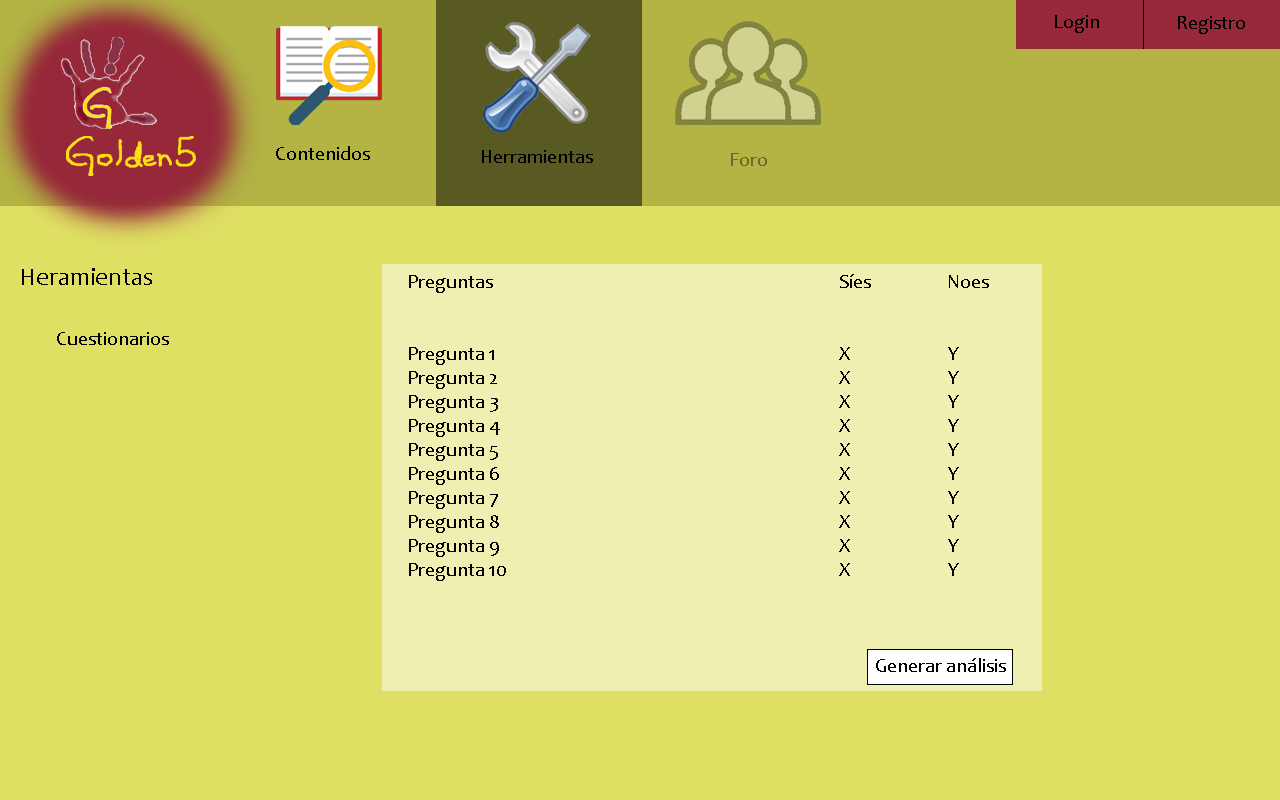
<style>
.page{position:relative;width:1280px;height:800px;background:#dedf63}
.page>*{position:absolute;margin:0}
.t1{font:20px "Candara";color:#000000}
.t2{font:25px "Candara";color:#000000}
</style>
<div class="page">
<p class="t1" style="left:22px;top:268px;width:147px;height:77px"><span class="t2">Heramientas<br><br> </span>Cuestionarios</p>
<p class="t1" style="left:409px;top:274px;width:597px;height:398px">Preguntas          Síes   Noes<br><br><br>Pregunta 1          X   Y<br>Pregunta 2          X   Y<br>Pregunta 3          X   Y<br>Pregunta 4          X   Y<br>Pregunta 5          X   Y<br>Pregunta 6          X   Y<br>Pregunta 7          X   Y<br>Pregunta 8          X   Y<br>Pregunta 9          X   Y<br>Pregunta 10          X   Y<br><br><br><br>             Generar análisis</p>
</div>
